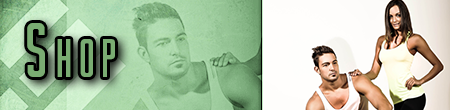
<style>
.page{position:relative;width:450px;height:110px}
.page>*{position:absolute;margin:0}
.t1{font:80px "Sturkopf";letter-spacing:0.12em;color:#7aac72;font-variant:small-caps}
</style>
<div class="page">
<p class="t1" style="left:27px;top:23px;width:88px;height:54px">Shop</p>
</div>
